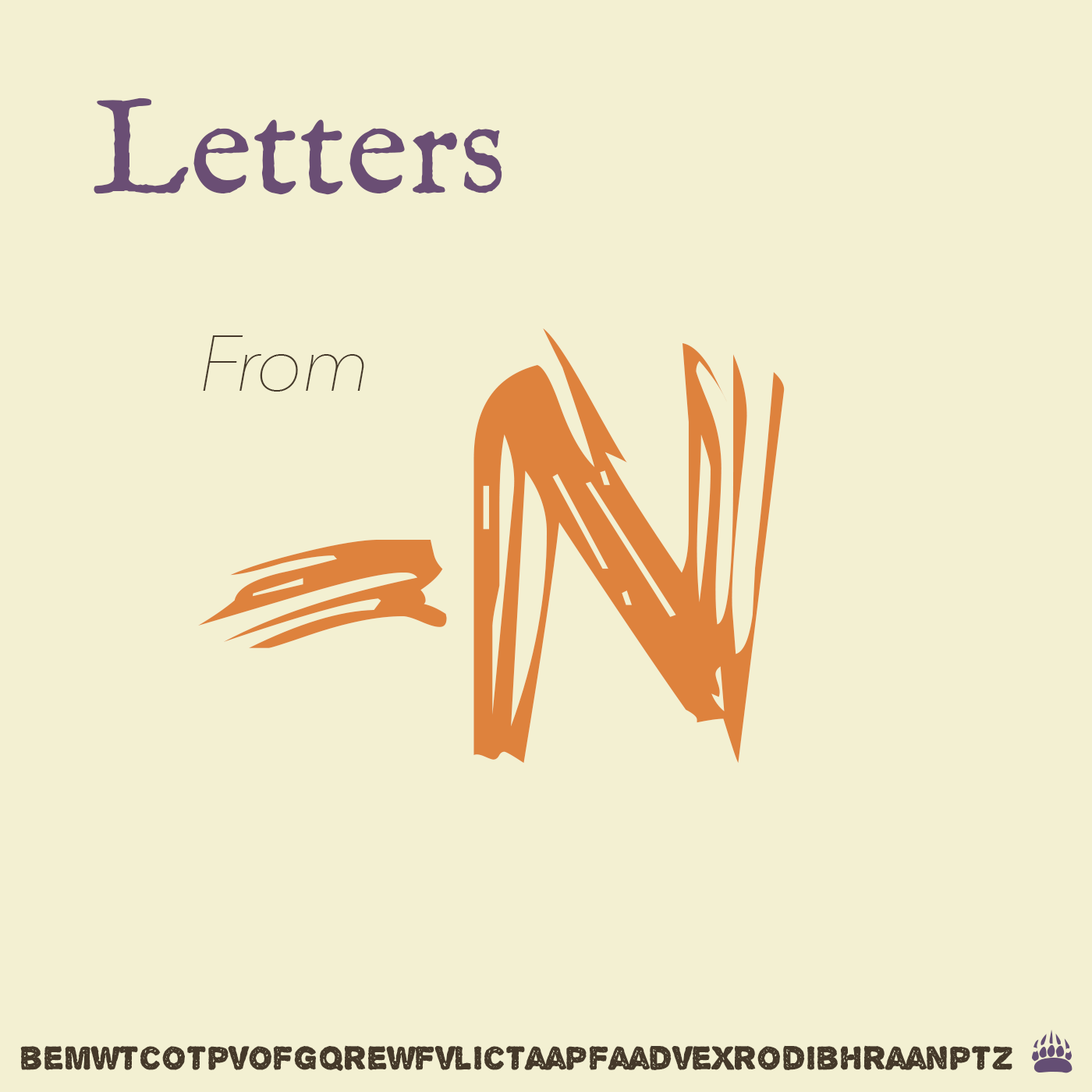
<style>
.page{position:relative;width:1092px;height:1092px;background:#f3f0d2}
.page>*{position:absolute;margin:0}
.t1{font:136.5px "IM_FELL_English_PRO_Roman";color:#6a4e74}
.t2{font:845px "Bearpaw";color:#de823d}
.t3{font:78px "AvenirNext-UltraLightItalic";letter-spacing:-0.025em;color:#45392a}
.t4{font:84.5px "Bearpaw";color:#644e74}
.t5{font:35.7px "AlphaEcho";color:#45392a}
</style>
<div class="page">
<p class="t1" style="left:94px;top:97px;width:408px;height:98px">Letters</p>
<p class="t2" style="left:198px;top:328px;width:587px;height:435px">-N</p>
<p class="t3" style="left:203px;top:335px;width:161px;height:57px">From</p>
<p class="t4" style="left:1032px;top:1030px;width:40px;height:43px">#</p>
<p class="t5" style="left:20px;top:1045px;width:992px;height:26px">bemwtcotpvofgqrewfvlictaapfaadvexrodibhraanptz</p>
</div>
